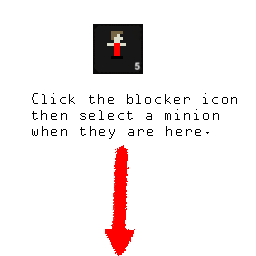
<style>
.page{position:relative;width:256px;height:256px;background:#ffffff}
.page>*{position:absolute;margin:0}
.t1{font:13.3px "OCRAStd";color:#000000}
</style>
<div class="page">
<p class="t1" style="left:32px;top:93px;width:205px;height:46px">Click the blocker icon<br>then select a minion <br>when they are here.</p>
</div>
